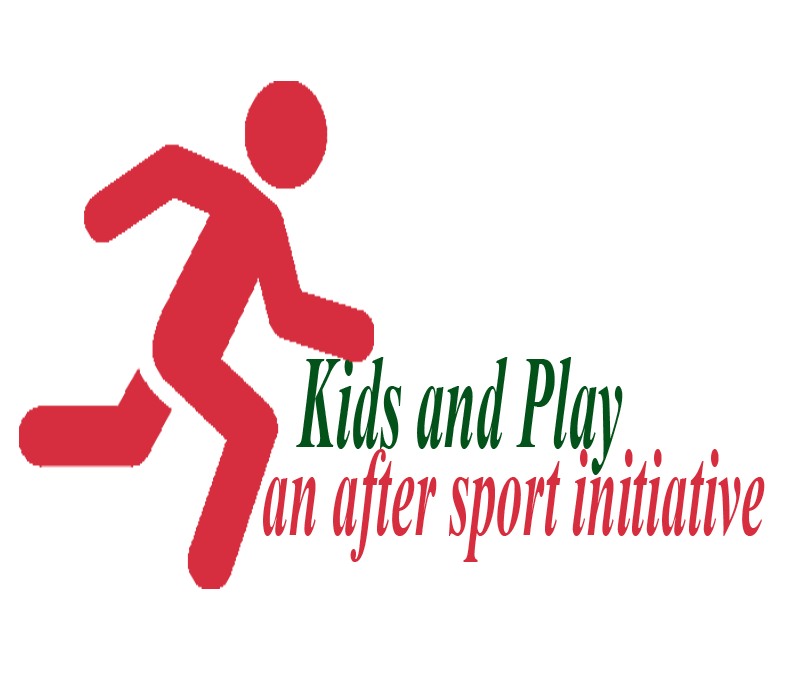
<style>
.page{position:relative;width:792px;height:700px;background:#ffffff}
.page>*{position:absolute;margin:0}
.t1{font:132.2px "TimesNewRomanPS-BoldItalicMT";color:#035219;scale:0.43 1}
.t2{font:127px "TimesNewRomanPS-BoldItalicMT";color:#d62e3e;scale:0.42 1}
</style>
<div class="page">
<p class="t1" style="left:296px;top:357px;width:327px;height:118px">Kids and Play</p>
<p class="t2" style="left:263px;top:449px;width:502px;height:113px">an after sport initiative</p>
</div>
